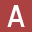
<style>
.page{position:relative;width:32px;height:32px;background:#ac4142}
.page>*{position:absolute;margin:0}
.t1{font:30px "Menlo-Regular";color:#ffffff}
</style>
<div class="page">
<p class="t1" style="left:7px;top:5px;width:18px;height:22px">A</p>
</div>
